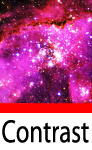
<style>
.page{position:relative;width:92px;height:150px}
.page>*{position:absolute;margin:0}
.t1{font:32.3px "MyriadPro-Regular";color:#000000;scale:0.76 1}
</style>
<div class="page">
<p class="t1" style="left:2px;top:120px;width:87px;height:23px">Contrast</p>
</div>
